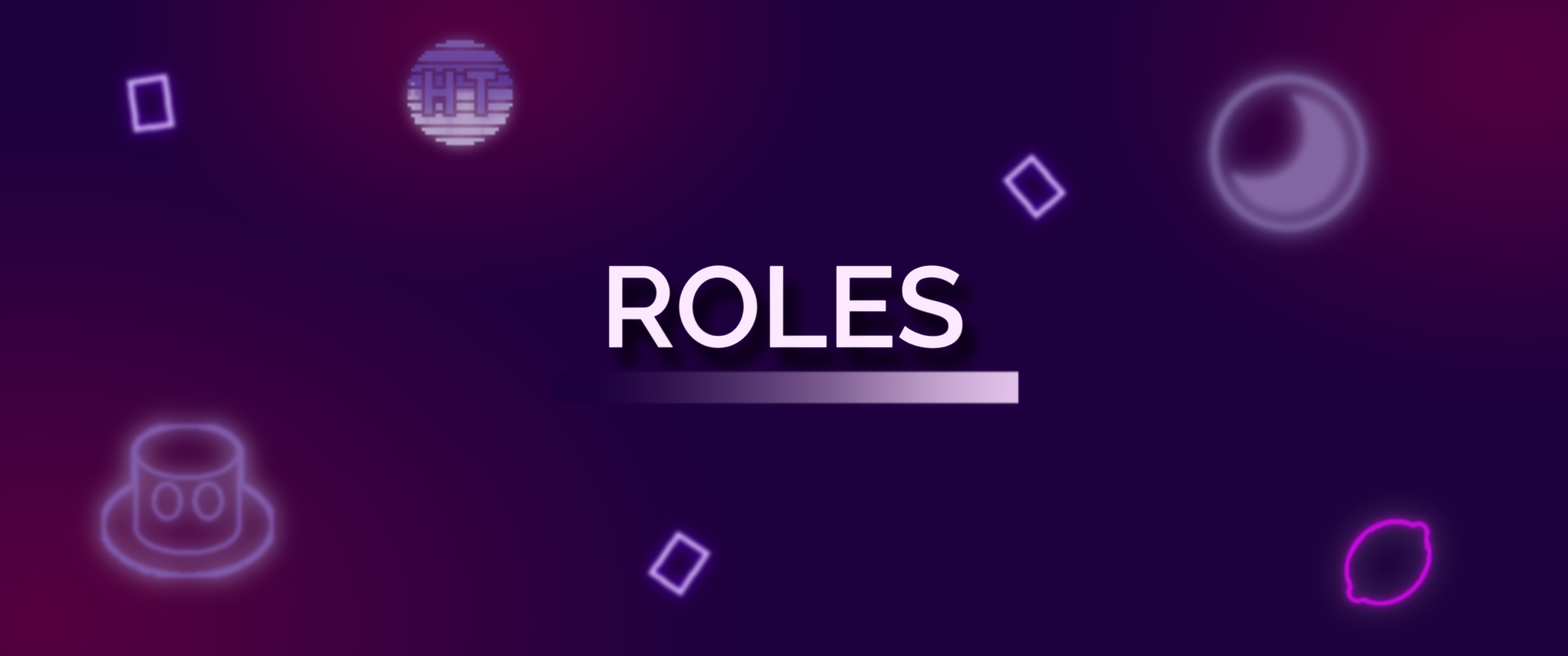
<style>
.page{position:relative;width:1568px;height:656px;background:#1f003f}
.page>*{position:absolute;margin:0}
.t1{font:114px "Raleway-SemiBold";color:#eceff4}
</style>
<div class="page">
<p class="t1" style="left:609px;top:266px;width:354px;height:82px">ROLES</p>
</div>
